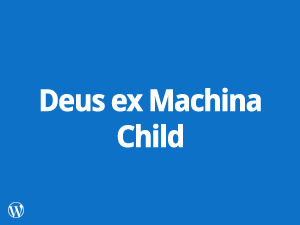
<style>
.page{position:relative;width:300px;height:225px;background:#0d72c7}
.page>*{position:absolute;margin:0}
.t1{font:30px "DroidSans-Bold";letter-spacing:-0.075em;color:#ffffff;font-weight:bold}
</style>
<div class="page">
<p class="t1" style="left:40px;top:87px;width:221px;height:61px;text-align:center">Deus ex Machina<br>Child</p>
</div>
